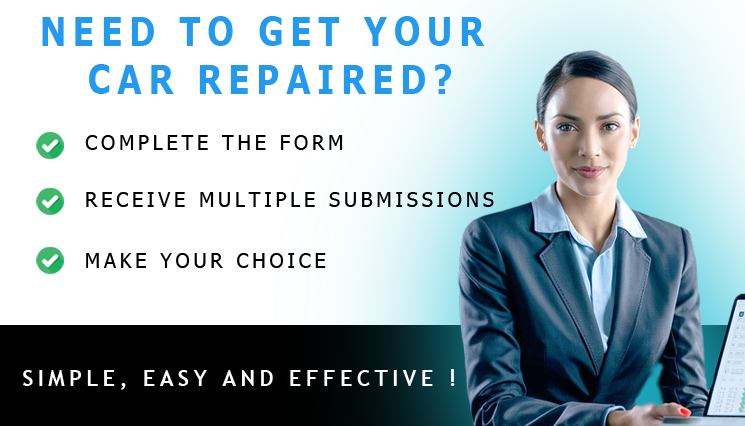
<style>
.page{position:relative;width:745px;height:426px;background:#ffffff}
.page>*{position:absolute;margin:0}
.t1{font:39.9px/48px "Verdana-Bold";letter-spacing:0.2em;color:#239aed;text-transform:uppercase;scale:0.8 1}
.t2{font:19.7px "Tahoma";letter-spacing:0.2em;color:#010101;text-transform:uppercase}
.t3{font:21.9px "TrebuchetMS-Bold";letter-spacing:0.2em;color:#fdfdfd;text-transform:uppercase}
</style>
<div class="page">
<p class="t1" style="left:42px;top:16px;width:443px;height:78px;text-align:center">Need to get your <br>car repaired?</p>
<p class="t2" style="left:85px;top:135px;width:258px;height:15px">Complete the form</p>
<p class="t2" style="left:86px;top:192px;width:408px;height:15px">Receive multiple submissions</p>
<p class="t2" style="left:86px;top:253px;width:240px;height:15px">Make your choice</p>
<p class="t3" style="left:23px;top:369px;width:432px;height:21px">Simple, easy and effective !</p>
</div>
